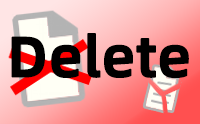
<style>
.page{position:relative;width:200px;height:124px}
.page>*{position:absolute;margin:0}
.t1{font:56.4px "AlibabaPuHuiTiM";color:#010000;font-weight:bold}
</style>
<div class="page">
<p class="t1" style="left:11px;top:33px;width:178px;height:45px">Delete</p>
</div>
